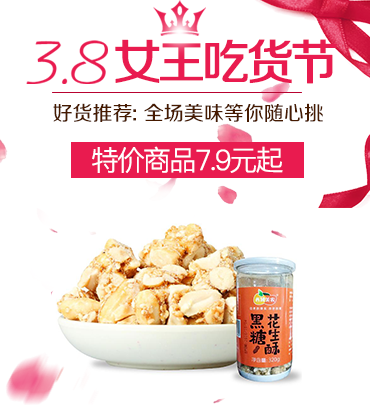
<style>
.page{position:relative;width:370px;height:416px;background:#ffffff}
.page>*{position:absolute;margin:0}
.t1{font:61.9px "FZYBXSJW--GB1-0";letter-spacing:-0.04em;color:#e91b4f;font-weight:bold}
.t2{font:47.8px "FZZZHUNHJW--GB1-0";letter-spacing:-0.1em;color:#e91b4f;font-weight:bold}
.t3{font:20px "FZZZHUNHJW--GB1-0";color:#461a00}
.t4{font:28px "PingFang-SC-Regular";letter-spacing:-0.1em;color:#ffffff;font-weight:bold}
</style>
<div class="page">
<p class="t1" style="left:26px;top:40px;width:82px;height:44px">3.8</p>
<p class="t2" style="left:115px;top:39px;width:222px;height:45px">女王吃货节</p>
<p class="t3" style="left:53px;top:103px;width:270px;height:19px">好货推荐: 全场美味等你随心挑</p>
<p class="t4" style="left:92px;top:146px;width:191px;height:27px">特价商品7.9元起</p>
</div>
